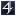
<style>
.page{position:relative;width:16px;height:16px}
.page>*{position:absolute;margin:0}
.t1{font:20.8px "ColonnaMT";color:#ffffff}
</style>
<div class="page">
<p class="t1" style="left:2px;top:1px;width:11px;height:13px">4</p>
</div>
